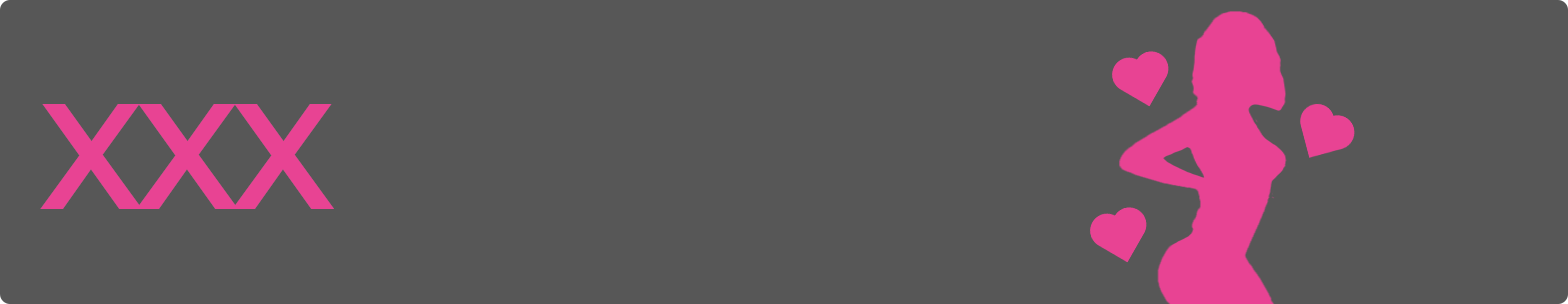
<style>
.page{position:relative;width:1568px;height:304px;background:#575757}
.page>*{position:absolute;margin:0}
.t1{font:150px "Montserrat-SemiBold";letter-spacing:-0.04em;color:#e84393}
</style>
<div class="page">
<p class="t1" style="left:40px;top:104px;width:294px;height:105px">XXX</p>
</div>
